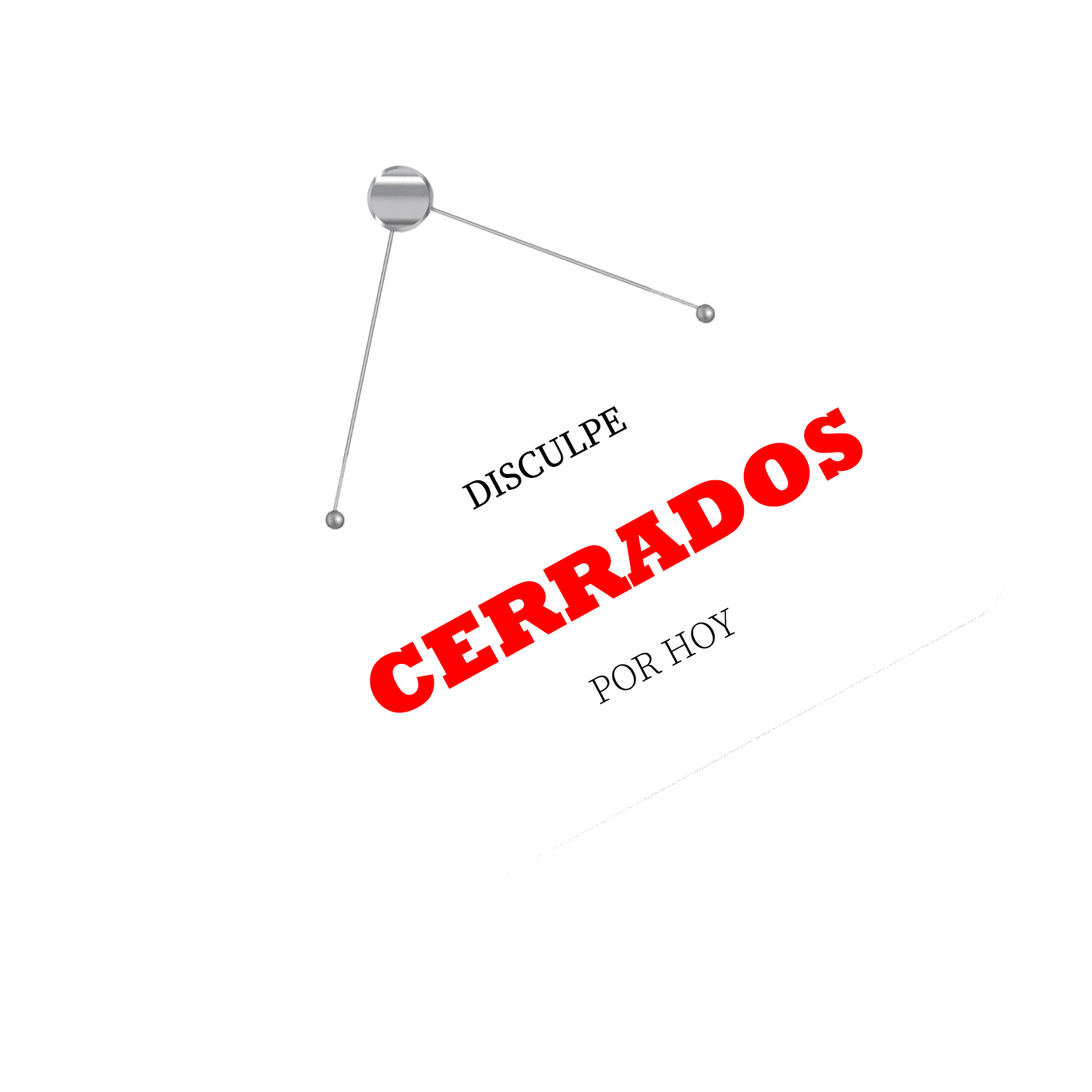
<style>
.page{position:relative;width:1092px;height:1092px;background:#ffffff}
.page>*{position:absolute;margin:0}
.t1{font:87px "Rockwell-ExtraBold";color:#ff0000}
.t2{font:38px "SourceSerifRoman-Regular";color:#000000}
.t3{font:38px "SourceSerifRoman-Light";color:#000000}
</style>
<div class="page">
<p class="t1" style="left:370px;top:407px;width:493px;height:306px;rotate:-29deg">CERRADOS</p>
<p class="t2" style="left:461px;top:406px;width:166px;height:104px;rotate:-28deg">DISCULPE</p>
<p class="t3" style="left:588px;top:607px;width:147px;height:98px;rotate:-28deg">POR HOY</p>
</div>
